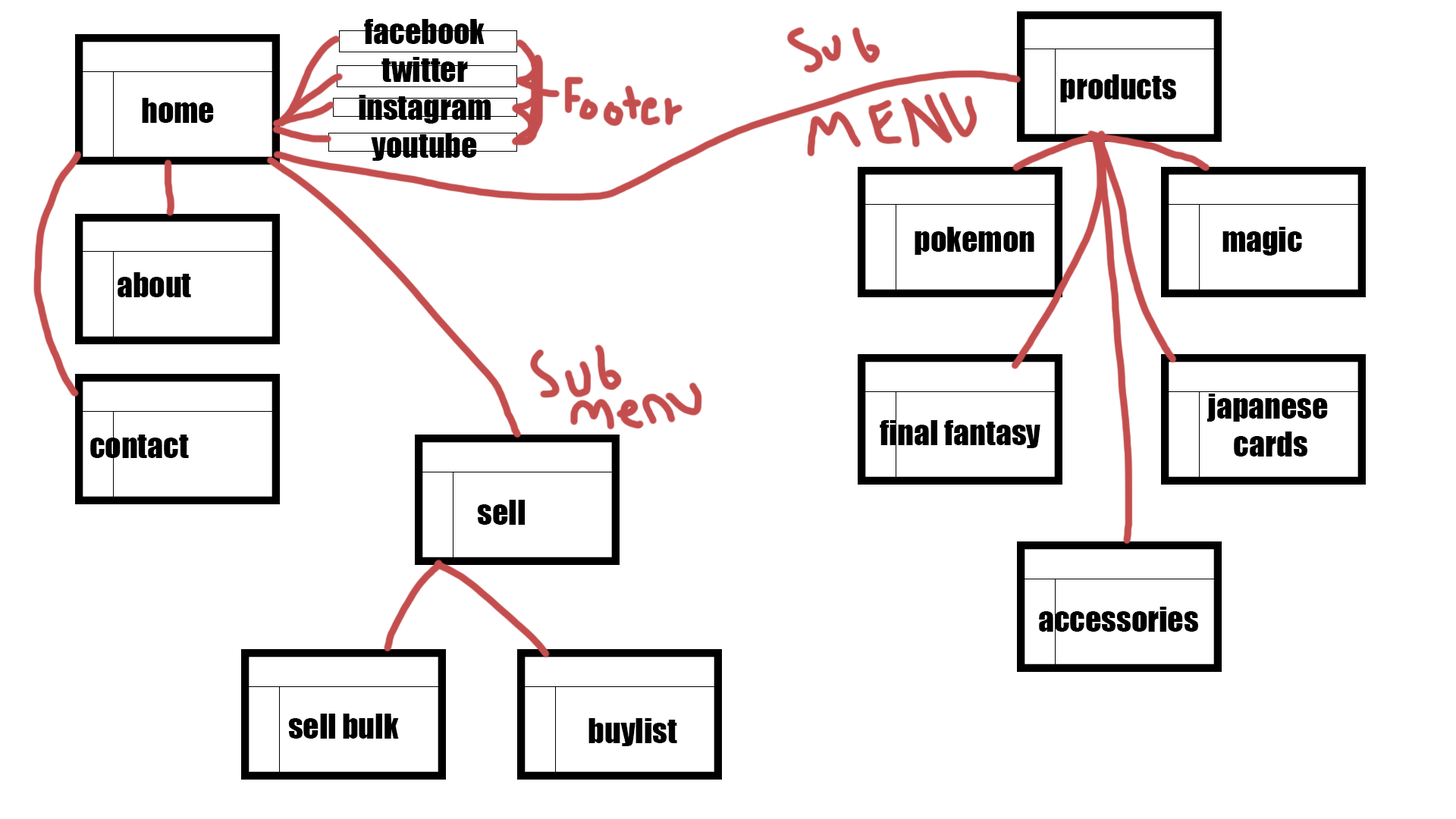
<style>
.page{position:relative;width:1456px;height:819px;background:#ffffff}
.page>*{position:absolute;margin:0}
.t1{font:31.6px "Impact";color:#000000}
</style>
<div class="page">
<p class="t1" style="left:359px;top:19px;width:132px;height:142px;text-align:center">facebook<br>twitter<br>instagram<br>youtube</p>
<p class="t1" style="left:1060px;top:74px;width:116px;height:28px">products</p>
<p class="t1" style="left:142px;top:98px;width:72px;height:25px">home</p>
<p class="t1" style="left:915px;top:227px;width:119px;height:28px">pokemon</p>
<p class="t1" style="left:1222px;top:227px;width:80px;height:29px">magic</p>
<p class="t1" style="left:118px;top:272px;width:73px;height:25px">about</p>
<p class="t1" style="left:1206px;top:394px;width:122px;height:63px;text-align:center">japanese <br>cards</p>
<p class="t1" style="left:880px;top:420px;width:160px;height:28px">final fantasy</p>
<p class="t1" style="left:90px;top:435px;width:99px;height:23px">contact</p>
<p class="t1" style="left:477px;top:500px;width:48px;height:25px">sell</p>
<p class="t1" style="left:1039px;top:607px;width:159px;height:25px">accessories</p>
<p class="t1" style="left:288px;top:714px;width:111px;height:25px">sell bulk</p>
<p class="t1" style="left:588px;top:718px;width:89px;height:28px">buylist</p>
</div>
